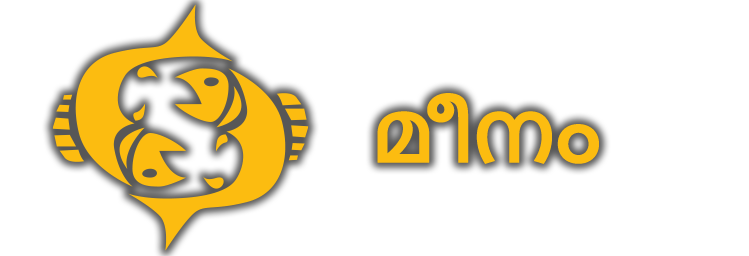
<style>
.page{position:relative;width:749px;height:256px;background:#ffffff}
.page>*{position:absolute;margin:0}
.t1{font:70.8px "NirmalaUI-Bold";letter-spacing:-0.05em;color:#fcbc10;text-transform:uppercase;font-weight:bold}
</style>
<div class="page">
<p class="t1" style="left:377px;top:93px;width:222px;height:71px">മീനം</p>
</div>
